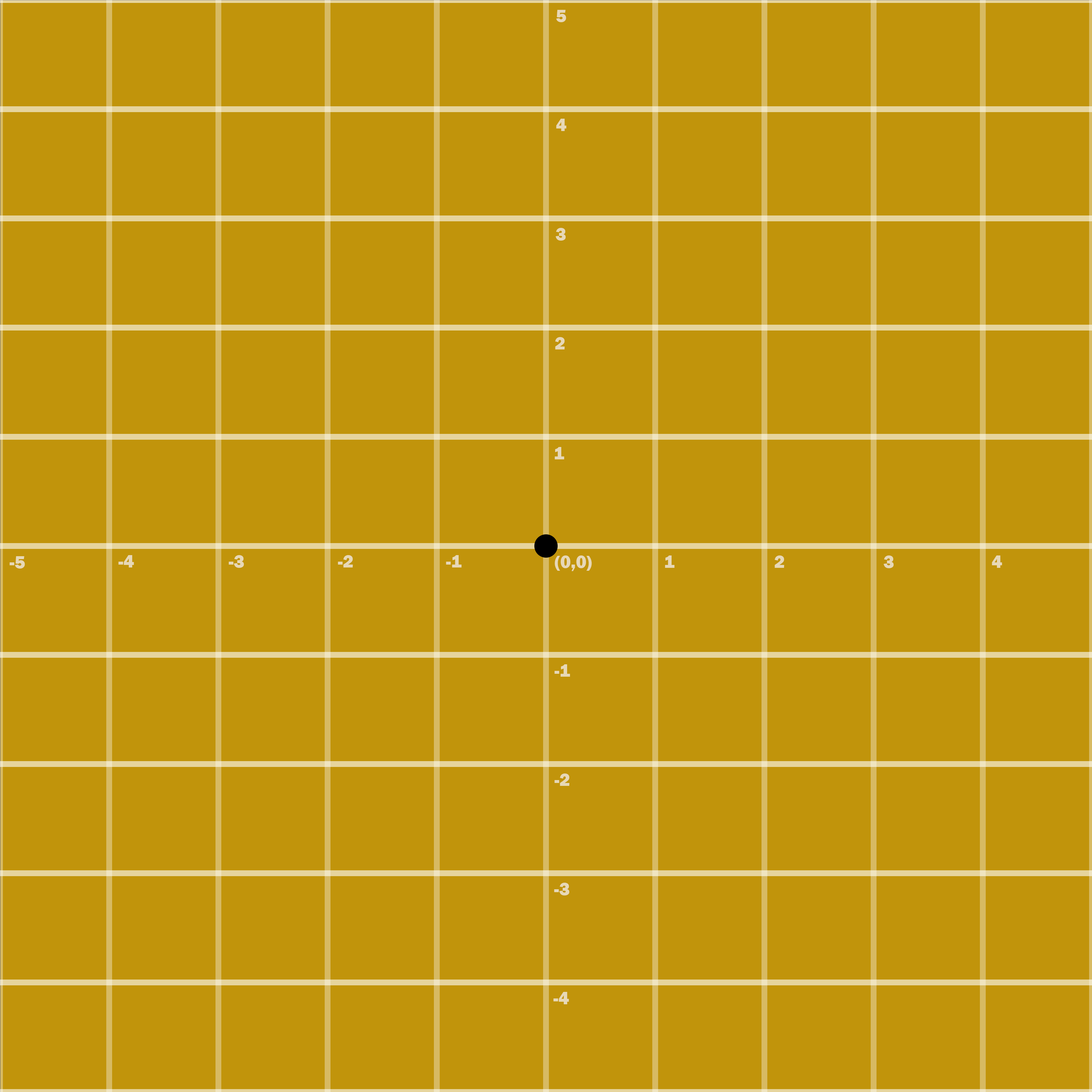
<style>
.page{position:relative;width:1092px;height:1092px;background:#c1940b}
.page>*{position:absolute;margin:0}
.t1{font:18.2px "FranklinGothic-Heavy";color:#e7d8b7}
</style>
<div class="page">
<p class="t1" style="left:556px;top:10px;width:10px;height:12px">5</p>
<p class="t1" style="left:556px;top:119px;width:10px;height:12px">4</p>
<p class="t1" style="left:555px;top:228px;width:11px;height:13px">3</p>
<p class="t1" style="left:555px;top:337px;width:10px;height:12px">2</p>
<p class="t1" style="left:555px;top:447px;width:9px;height:12px">1</p>
<p class="t1" style="left:9px;top:556px;width:16px;height:13px">-5</p>
<p class="t1" style="left:118px;top:555px;width:16px;height:12px">-4</p>
<p class="t1" style="left:229px;top:555px;width:15px;height:13px">-3</p>
<p class="t1" style="left:338px;top:555px;width:15px;height:12px">-2</p>
<p class="t1" style="left:446px;top:555px;width:16px;height:12px">-1</p>
<p class="t1" style="left:555px;top:555px;width:37px;height:16px">(0,0)</p>
<p class="t1" style="left:665px;top:555px;width:9px;height:13px">1</p>
<p class="t1" style="left:775px;top:555px;width:9px;height:13px">2</p>
<p class="t1" style="left:883px;top:555px;width:11px;height:13px">3</p>
<p class="t1" style="left:992px;top:555px;width:10px;height:13px">4</p>
<p class="t1" style="left:554px;top:664px;width:16px;height:13px">-1</p>
<p class="t1" style="left:554px;top:773px;width:16px;height:13px">-2</p>
<p class="t1" style="left:554px;top:883px;width:15px;height:12px">-3</p>
<p class="t1" style="left:553px;top:992px;width:16px;height:12px">-4</p>
</div>
